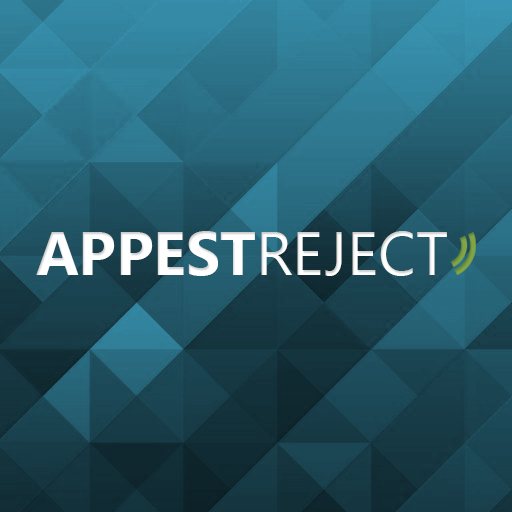
<style>
.page{position:relative;width:512px;height:512px}
.page>*{position:absolute;margin:0}
.t1{font:61px "NirmalaUI-Bold";color:#ffffff}
.t2{font:61px "NirmalaUI";color:#ffffff}
</style>
<div class="page">
<p class="t1" style="left:36px;top:231px;width:411px;height:45px">APPEST<span class="t2">REJECT</span></p>
</div>
